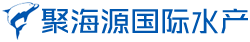
<style>
.page{position:relative;width:250px;height:42px;background:#ffffff}
.page>*{position:absolute;margin:0}
.t1{font:30px "BigYoungMediumGB2.0";color:#0057af}
</style>
<div class="page">
<p class="t1" style="left:41px;top:8px;width:207px;height:26px">聚海源国际水产</p>
</div>
